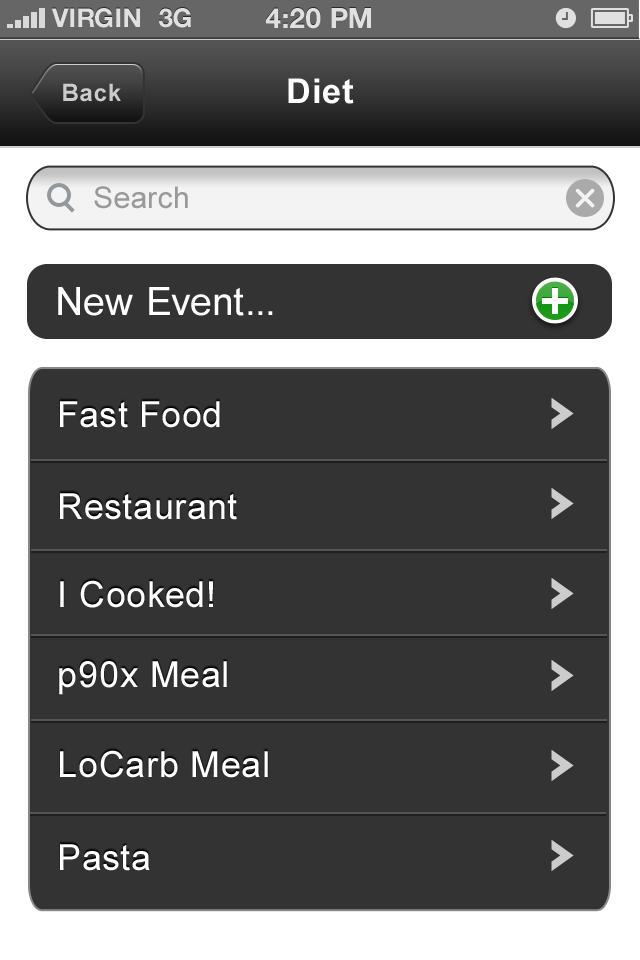
<style>
.page{position:relative;width:640px;height:960px;background:#333333}
.page>*{position:absolute;margin:0}
.t1{font:26px "HelveticaNeue-Bold";color:#e0e0e0;text-transform:uppercase}
.t2{font:28px "HelveticaNeue-Bold";color:#e0e0e0;text-transform:uppercase}
.t3{font:34px "Arial-BoldMT";letter-spacing:0.02em;color:#ffffff}
.t4{font:24px "Arial-BoldMT";letter-spacing:0.02em;color:#cccccc}
.t5{font:30px "ArialMT";letter-spacing:0.02em;color:#999999}
.t6{font:39px "ArialMT";letter-spacing:0.02em;color:#ffffff}
.t7{font:36px "ArialMT";letter-spacing:0.02em;color:#ffffff}
</style>
<div class="page">
<p class="t1" style="left:51px;top:8px;width:89px;height:20px">VIRGIN</p>
<p class="t1" style="left:159px;top:8px;width:32px;height:20px">3G</p>
<p class="t2" style="left:266px;top:8px;width:105px;height:21px">4:20 pM</p>
<p class="t3" style="left:288px;top:78px;width:66px;height:26px">Diet</p>
<p class="t4" style="left:63px;top:83px;width:58px;height:19px">Back</p>
<p class="t5" style="left:94px;top:186px;width:94px;height:23px">Search</p>
<p class="t6" style="left:58px;top:287px;width:215px;height:29px">New Event...</p>
<p class="t7" style="left:60px;top:401px;width:160px;height:27px">Fast Food</p>
<p class="t7" style="left:60px;top:493px;width:177px;height:27px">Restaurant</p>
<p class="t7" style="left:60px;top:580px;width:153px;height:28px">I Cooked!</p>
<p class="t7" style="left:59px;top:661px;width:168px;height:34px">p90x Meal</p>
<p class="t7" style="left:60px;top:750px;width:208px;height:28px">LoCarb Meal</p>
<p class="t7" style="left:60px;top:844px;width:90px;height:27px">Pasta</p>
</div>
